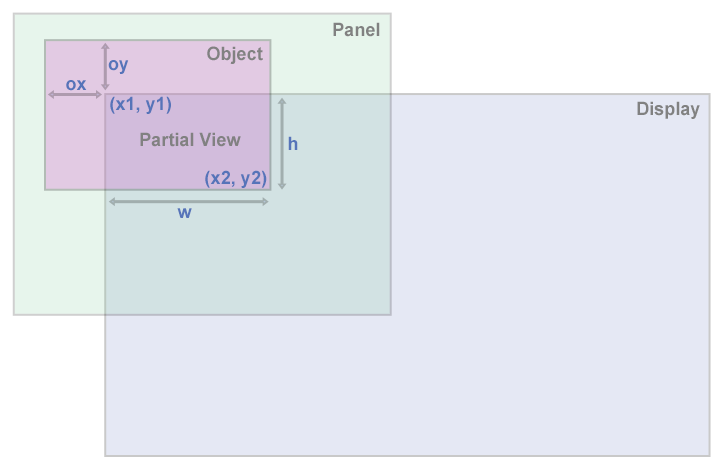
<style>
.page{position:relative;width:720px;height:467px;background:#e5e8f4}
.page>*{position:absolute;margin:0}
.t1{font:18.1px "Arial-BoldMT";color:#818181}
.t2{font:18.1px "Arial-BoldMT";color:#5674b9}
</style>
<div class="page">
<p class="t1" style="left:333px;top:22px;width:47px;height:15px">Panel</p>
<p class="t1" style="left:207px;top:46px;width:56px;height:18px">Object</p>
<p class="t2" style="left:108px;top:60px;width:21px;height:14px">oy</p>
<p class="t2" style="left:66px;top:80px;width:21px;height:11px">ox</p>
<p class="t2" style="left:110px;top:96px;width:61px;height:18px">(x1, y1)</p>
<p class="t1" style="left:637px;top:101px;width:63px;height:18px">Display</p>
<p class="t1" style="left:140px;top:132px;width:101px;height:15px">Partial View</p>
<p class="t2" style="left:288px;top:136px;width:10px;height:14px">h</p>
<p class="t2" style="left:205px;top:170px;width:62px;height:18px">(x2, y2)</p>
<p class="t2" style="left:177px;top:208px;width:15px;height:10px">w</p>
</div>
